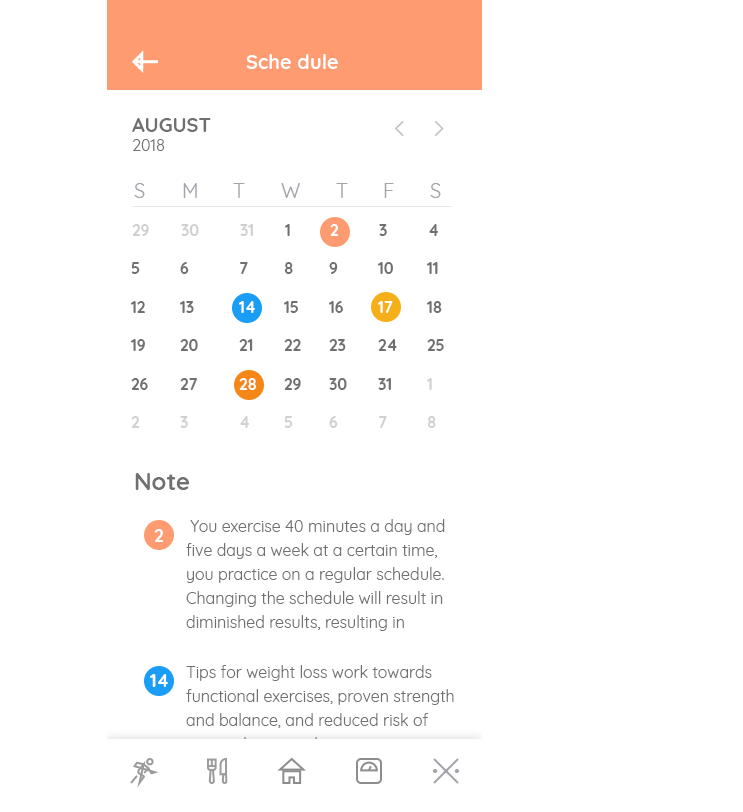
<style>
.page{position:relative;width:743px;height:812px;background:#ffffff}
.page>*{position:absolute;margin:0}
.t1{font:20px "Quicksand-Bold";color:#ffffff}
.t2{font:20px "Quicksand-Bold";color:#707070}
.t3{font:16px "Quicksand-Regular";color:#707070}
.t4{font:20px "Quicksand-Regular";color:#a4a2aa}
.t5{font:16px "Quicksand-Bold";color:#d0d0d3}
.t6{font:16px "Quicksand-Bold";color:#707070}
.t7{font:16px "Quicksand-Bold";color:#ffffff}
.t8{font:16px "Quicksand-Bold";color:#fbfbfb}
.t9{font:24px "Quicksand-Bold";color:#707070}
.t10{font:16px/24px "Quicksand-Regular";color:#707070}
.t11{font:18px "Quicksand-Bold";color:#ffffff}
</style>
<div class="page">
<p class="t1" style="left:246px;top:54px;width:92px;height:15px">Sche dule</p>
<p class="t2" style="left:132px;top:118px;width:79px;height:14px">AUGUST</p>
<p class="t3" style="left:133px;top:139px;width:32px;height:12px">2018</p>
<p class="t4" style="left:134px;top:183px;width:11px;height:15px">S</p>
<p class="t4" style="left:183px;top:183px;width:14px;height:15px">M</p>
<p class="t4" style="left:233px;top:183px;width:12px;height:15px">T</p>
<p class="t4" style="left:281px;top:183px;width:19px;height:15px">W</p>
<p class="t4" style="left:336px;top:183px;width:12px;height:15px">T</p>
<p class="t4" style="left:384px;top:183px;width:10px;height:15px">F</p>
<p class="t4" style="left:430px;top:183px;width:11px;height:15px">S</p>
<p class="t5" style="left:132px;top:224px;width:17px;height:12px">29</p>
<p class="t5" style="left:181px;top:224px;width:18px;height:12px">30</p>
<p class="t5" style="left:240px;top:224px;width:13px;height:12px">31</p>
<p class="t6" style="left:285px;top:224px;width:5px;height:12px">1</p>
<p class="t7" style="left:330px;top:224px;width:9px;height:12px">2</p>
<p class="t6" style="left:379px;top:224px;width:8px;height:12px">3</p>
<p class="t6" style="left:429px;top:224px;width:9px;height:12px">4</p>
<p class="t6" style="left:131px;top:262px;width:9px;height:12px">5</p>
<p class="t6" style="left:180px;top:262px;width:9px;height:12px">6</p>
<p class="t6" style="left:240px;top:262px;width:8px;height:12px">7</p>
<p class="t6" style="left:284px;top:262px;width:9px;height:12px">8</p>
<p class="t6" style="left:329px;top:262px;width:9px;height:12px">9</p>
<p class="t6" style="left:378px;top:262px;width:15px;height:12px">10</p>
<p class="t6" style="left:427px;top:262px;width:11px;height:12px">11</p>
<p class="t6" style="left:131px;top:301px;width:14px;height:12px">12</p>
<p class="t6" style="left:180px;top:301px;width:14px;height:12px">13</p>
<p class="t7" style="left:239px;top:301px;width:16px;height:12px">14</p>
<p class="t6" style="left:284px;top:301px;width:14px;height:12px">15</p>
<p class="t6" style="left:329px;top:301px;width:14px;height:12px">16</p>
<p class="t7" style="left:378px;top:301px;width:15px;height:12px">17</p>
<p class="t6" style="left:427px;top:301px;width:15px;height:12px">18</p>
<p class="t6" style="left:131px;top:339px;width:14px;height:12px">19</p>
<p class="t6" style="left:180px;top:339px;width:18px;height:12px">20</p>
<p class="t6" style="left:239px;top:339px;width:14px;height:12px">21</p>
<p class="t6" style="left:284px;top:339px;width:17px;height:12px">22</p>
<p class="t6" style="left:329px;top:339px;width:17px;height:12px">23</p>
<p class="t6" style="left:378px;top:339px;width:19px;height:12px">24</p>
<p class="t6" style="left:427px;top:339px;width:17px;height:12px">25</p>
<p class="t6" style="left:131px;top:378px;width:17px;height:12px">26</p>
<p class="t6" style="left:180px;top:378px;width:17px;height:12px">27</p>
<p class="t8" style="left:239px;top:378px;width:17px;height:12px">28</p>
<p class="t6" style="left:284px;top:378px;width:17px;height:12px">29</p>
<p class="t6" style="left:329px;top:378px;width:18px;height:12px">30</p>
<p class="t6" style="left:378px;top:378px;width:13px;height:12px">31</p>
<p class="t5" style="left:427px;top:378px;width:5px;height:12px">1</p>
<p class="t5" style="left:131px;top:416px;width:9px;height:12px">2</p>
<p class="t5" style="left:180px;top:416px;width:8px;height:12px">3</p>
<p class="t5" style="left:240px;top:416px;width:9px;height:12px">4</p>
<p class="t5" style="left:284px;top:416px;width:9px;height:12px">5</p>
<p class="t5" style="left:329px;top:416px;width:9px;height:12px">6</p>
<p class="t5" style="left:379px;top:416px;width:8px;height:12px">7</p>
<p class="t5" style="left:427px;top:416px;width:9px;height:12px">8</p>
<p class="t9" style="left:135px;top:473px;width:55px;height:17px">Note</p>
<p class="t10" style="left:186px;top:519px;width:259px;height:112px">You exercise 40 minutes a day and five days a week at a certain time, you practice on a regular schedule. Changing the schedule will result in diminished results, resulting in fatigue.</p>
<p class="t11" style="left:154px;top:529px;width:10px;height:13px">2</p>
<p class="t10" style="left:186px;top:665px;width:268px;height:109px">Tips for weight loss work towards functional exercises, proven strength and balance, and reduced risk of injury when muscle groups are active at the same time.</p>
<p class="t11" style="left:150px;top:674px;width:18px;height:13px">14</p>
</div>
